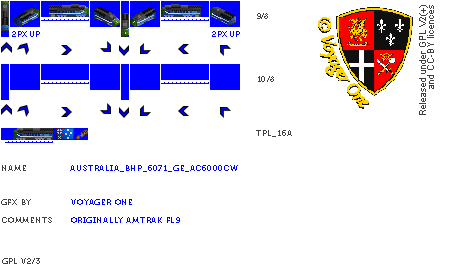
<style>
.page{position:relative;width:450px;height:280px;background:#ffffff}
.page>*{position:absolute;margin:0}
.t1{font:8px "Museo700-Regular";color:#404040}
.t2{font:8px "Museo700-Regular";color:#0000ff;text-transform:uppercase}
.t3{font:8px "Museo700-Regular";letter-spacing:0.075em;color:#404040}
.t4{font:8px "Museo700-Regular";letter-spacing:0.075em;color:#404040;text-transform:uppercase}
.t5{font:8px "Museo700-Regular";letter-spacing:0.075em;color:#0000ff;text-transform:uppercase}
</style>
<div class="page">
<p class="t1" style="left:257px;top:13px;width:11px;height:6px">9/8</p>
<p class="t2" style="left:12px;top:31px;width:28px;height:6px">2px up</p>
<p class="t2" style="left:212px;top:31px;width:28px;height:6px">2px up</p>
<p class="t3" style="left:258px;top:76px;width:16px;height:6px">10/8</p>
<p class="t4" style="left:256px;top:130px;width:36px;height:7px">tpl_16a</p>
<p class="t4" style="left:2px;top:165px;width:24px;height:6px">name</p>
<p class="t5" style="left:70px;top:165px;width:168px;height:7px">Australia_BHP_6071_GE_AC6000CW</p>
<p class="t4" style="left:1px;top:199px;width:30px;height:6px">gfx by</p>
<p class="t5" style="left:71px;top:199px;width:61px;height:6px">voyager one</p>
<p class="t4" style="left:2px;top:217px;width:50px;height:6px">comments</p>
<p class="t5" style="left:71px;top:217px;width:109px;height:6px">originally amtrak fl9</p>
<p class="t4" style="left:2px;top:258px;width:38px;height:6px">gpl v2/3</p>
</div>
